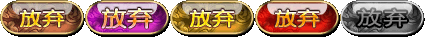
<style>
.page{position:relative;width:425px;height:37px}
.page>*{position:absolute;margin:0}
.t1{font:18.4px "STXihei";color:#868585;font-weight:bold;scale:1.38 1}
</style>
<div class="page">
<p class="t1" style="left:357px;top:9px;width:50px;height:18px">放弃</p>
</div>
